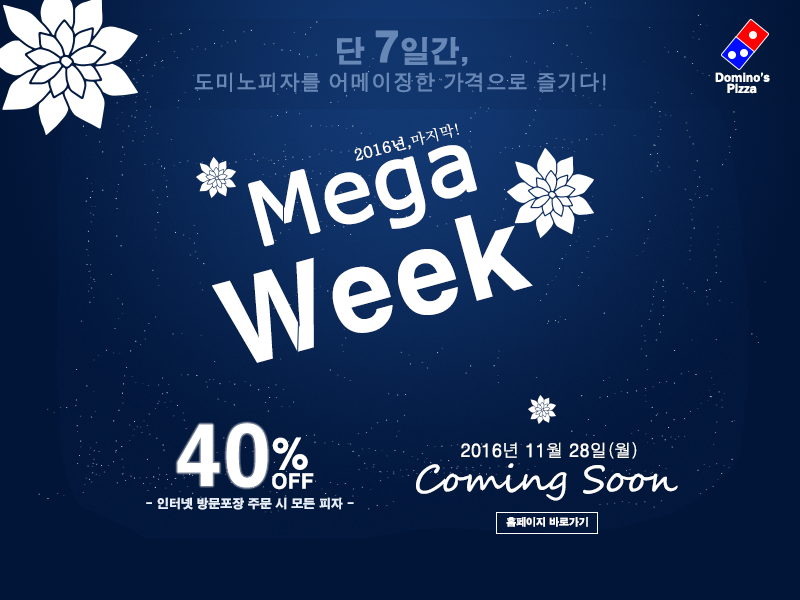
<style>
.page{position:relative;width:800px;height:600px}
.page>*{position:absolute;margin:0}
.t1{font:30px "H2gtrE";letter-spacing:-0.01em;color:#7193c3}
.t2{font:40px "H2gtrE";letter-spacing:-0.01em;color:#7193c3;font-weight:bold}
.t3{font:21px "H2gtrM";letter-spacing:-0.01em;color:#7193c3;font-weight:bold}
.t4{font:13px "FranklinGothic-Medium";letter-spacing:-0.01em;color:#ffffff;font-weight:bold}
.t5{font:15px "H2mjsM";letter-spacing:-0.01em;color:#ffffff;font-weight:bold}
.t6{font:15px "H2mjsM";letter-spacing:-0.01em;color:#ffffff}
.t7{font:86.1px "Verdana";letter-spacing:-0.01em;color:#ffffff;font-weight:bold}
.t8{font:110px "H2gtrE";letter-spacing:-0.01em;color:#ffffff}
.t9{font:80px "H2gtrE";letter-spacing:-0.01em;color:#ffffff}
.t10{font:40px "H2gtrE";letter-spacing:-0.01em;color:#ffffff}
.t11{font:17.4px "H2gtrM";letter-spacing:-0.01em;color:#ffffff;font-weight:bold}
.t12{font:17.4px "H2gtrM";letter-spacing:-0.01em;color:#ffffff}
.t13{font:20px "H2gtrE";letter-spacing:-0.01em;color:#ffffff}
.t14{font:38px "SegoeScript";letter-spacing:-0.01em;color:#ffffff}
.t15{font:12px "H2gtrE";letter-spacing:-0.01em;color:#e6effb}
.t16{font:10px "H2gtrE";letter-spacing:-0.01em;color:#ffffff}
</style>
<div class="page">
<p class="t1" style="left:337px;top:30px;width:131px;height:37px">단 <span class="t2">7</span>일간,</p>
<p class="t3" style="left:194px;top:72px;width:412px;height:21px">도미노피자를 어메이징한 가격으로 즐기다!</p>
<p class="t4" style="left:715px;top:72px;width:55px;height:10px">Domino’s</p>
<p class="t4" style="left:727px;top:83px;width:30px;height:11px">Pizza</p>
<p class="t5" style="left:354px;top:123px;width:105px;height:38px;rotate:-14deg">2016년,<span class="t6">마지막!</span></p>
<p class="t7" style="left:248px;top:145px;width:229px;height:102px;rotate:-15deg">Mega</p>
<p class="t8" style="left:212px;top:215px;width:321px;height:148px;rotate:-15deg">Week</p>
<p class="t9" style="left:177px;top:423px;width:91px;height:65px">40</p>
<p class="t10" style="left:272px;top:437px;width:36px;height:33px">%</p>
<p class="t11" style="left:461px;top:442px;width:176px;height:17px">2016<span class="t12">년 </span>11<span class="t12">월 </span>28<span class="t12">일(월)</span></p>
<p class="t13" style="left:272px;top:473px;width:42px;height:17px">OFF</p>
<p class="t14" style="left:416px;top:463px;width:262px;height:38px">Coming Soon</p>
<p class="t15" style="left:146px;top:497px;width:208px;height:13px">- 인터넷 방문포장 주문 시 모든 피자 -</p>
<p class="t16" style="left:506px;top:517px;width:82px;height:10px">홈페이지 바로가기</p>
</div>
